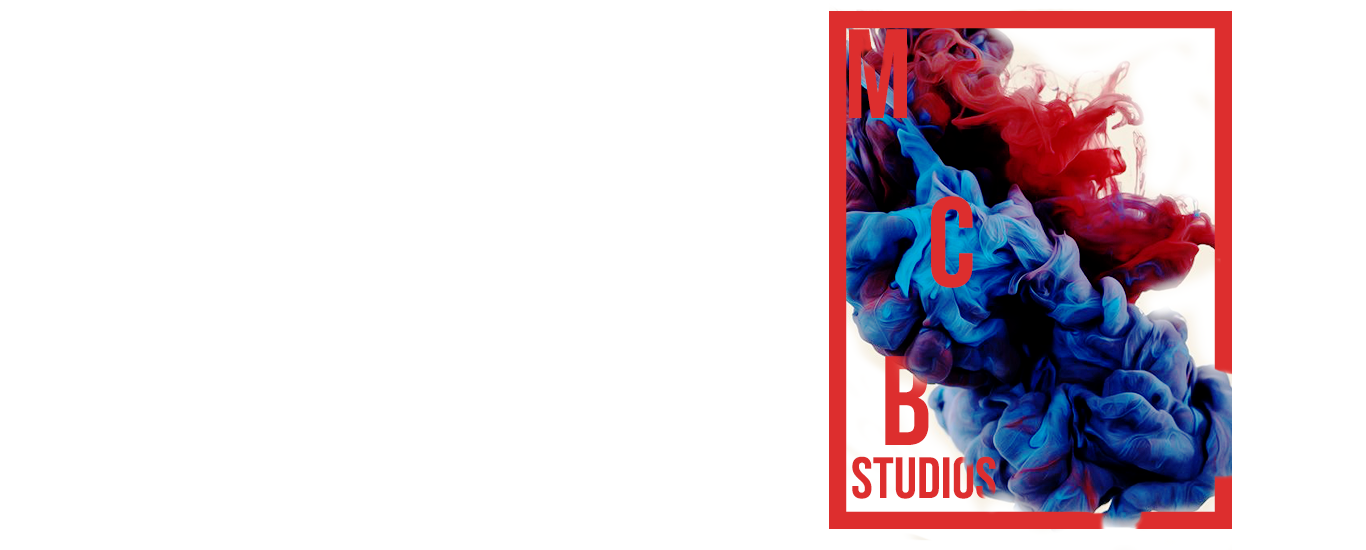
<style>
.page{position:relative;width:1366px;height:550px;background:#ffffff}
.page>*{position:absolute;margin:0}
.t1{font:126.5px "BebasNeue-Regular";color:#dd2e2e}
.t2{font:58px "BebasNeue-Regular";color:#dd2e2e}
</style>
<div class="page">
<p class="t1" style="left:849px;top:29px;width:58px;height:89px">m</p>
<p class="t1" style="left:931px;top:196px;width:42px;height:92px">c</p>
<p class="t1" style="left:885px;top:356px;width:44px;height:89px">b</p>
<p class="t2" style="left:852px;top:456px;width:144px;height:43px">studios</p>
</div>
